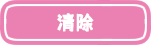
<style>
.page{position:relative;width:151px;height:45px;background:#eb81b2}
.page>*{position:absolute;margin:0}
.t1{font:12px "shetumodengxiaofangti";color:#ffffff;font-weight:bold;scale:0.94 1}
</style>
<div class="page">
<p class="t1" style="left:57px;top:13px;width:37px;height:19px">清除</p>
</div>
